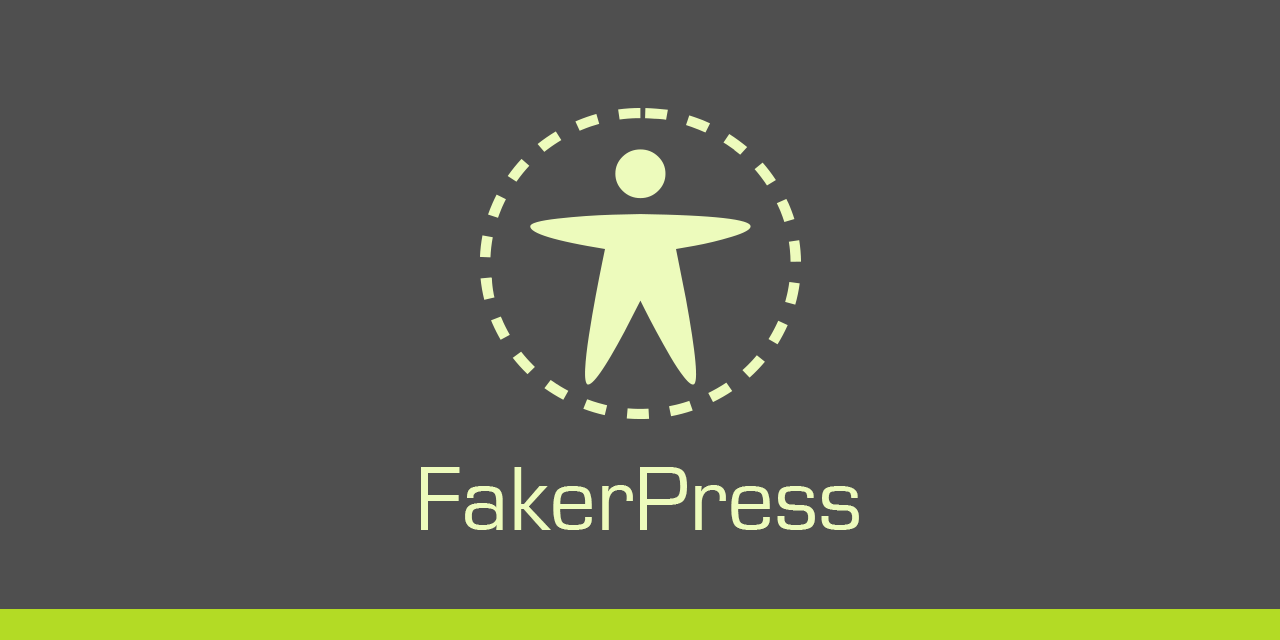
<style>
.page{position:relative;width:1280px;height:640px;background:#4f4f4f}
.page>*{position:absolute;margin:0}
.t1{font:94.1px "EurostileRegular";color:#edfbbc}
</style>
<div class="page">
<p class="t1" style="left:421px;top:467px;width:438px;height:63px">FakerPress</p>
</div>
